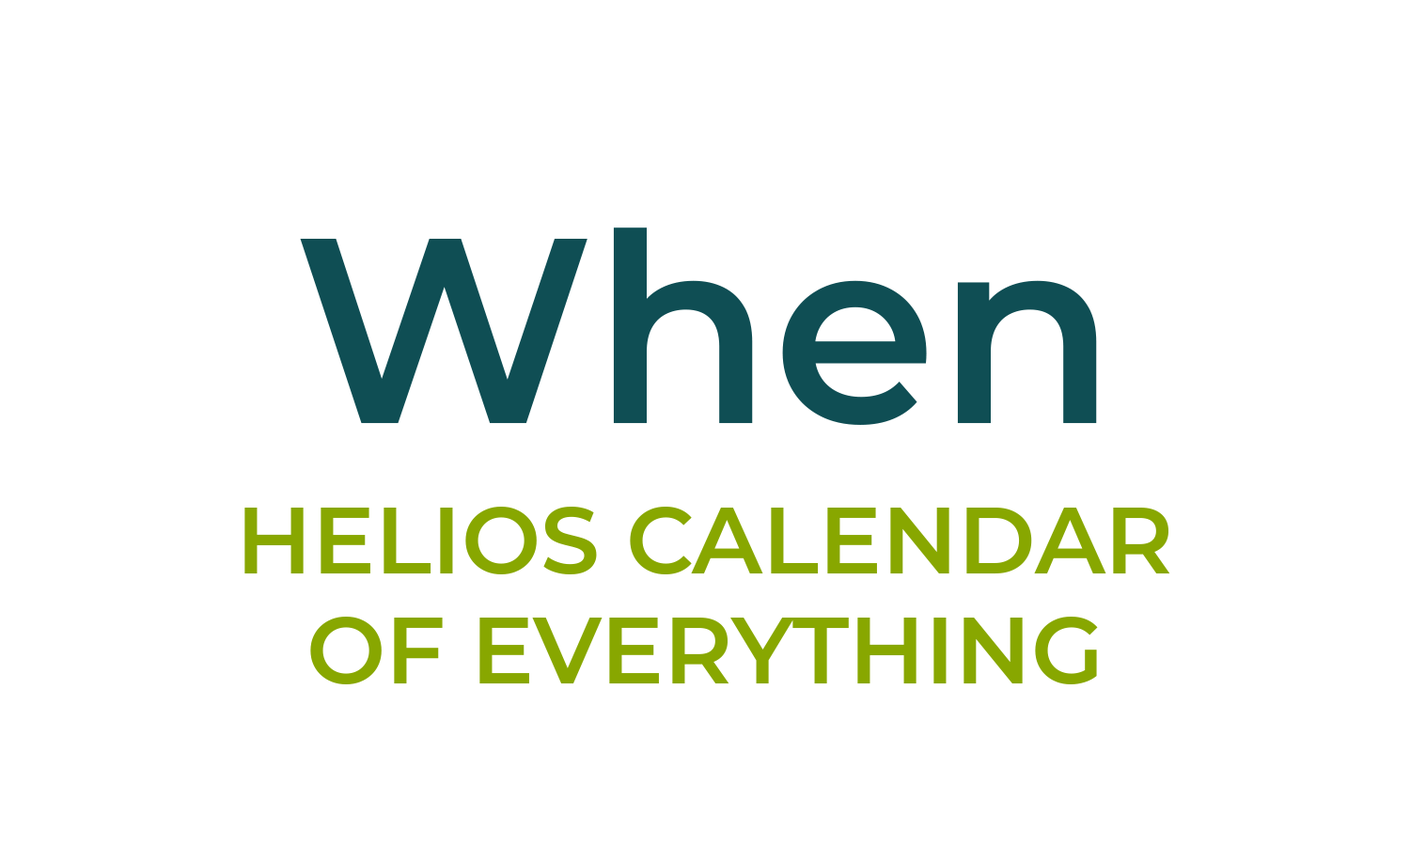
<style>
.page{position:relative;width:1410px;height:846px;background:#ffffff}
.page>*{position:absolute;margin:0}
.t1{font:263.1px "Montserrat-SemiBold";color:#0f4e54}
.t2{font:94px/0.2px "Montserrat-SemiBold";color:#88a700;text-transform:uppercase}
</style>
<div class="page">
<p class="t1" style="left:300px;top:227px;width:797px;height:198px">When</p>
<p class="t2" style="left:244px;top:507px;width:926px;height:177px;text-align:center">HELIOS CALENDAR<br><br>OF EVERYTHING</p>
</div>
